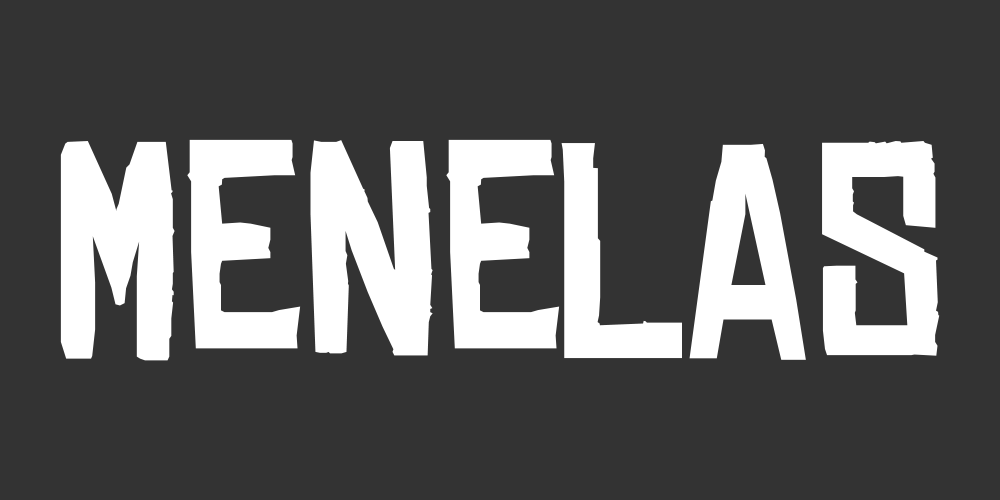
<style>
.page{position:relative;width:1000px;height:500px;background:#333333}
.page>*{position:absolute;margin:0}
.t1{font:291.7px "ChineseRocksRg-Regular";color:#ffffff}
</style>
<div class="page">
<p class="t1" style="left:60px;top:139px;width:880px;height:222px">MENELAS</p>
</div>
